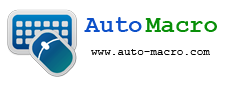
<style>
.page{position:relative;width:245px;height:86px;background:#ffffff}
.page>*{position:absolute;margin:0}
.t1{font:24px "CourierNewPS-BoldMT";color:#0d50c9}
.t2{font:24px "CourierNewPS-BoldMT";color:#098f09}
.t3{font:11px "CourierNewPSMT";color:#000000}
</style>
<div class="page">
<p class="t1" style="left:84px;top:17px;width:58px;height:15px">Auto</p>
<p class="t2" style="left:145px;top:18px;width:72px;height:14px">Macro</p>
<p class="t3" style="left:91px;top:49px;width:119px;height:6px">www.auto-macro.com</p>
</div>
